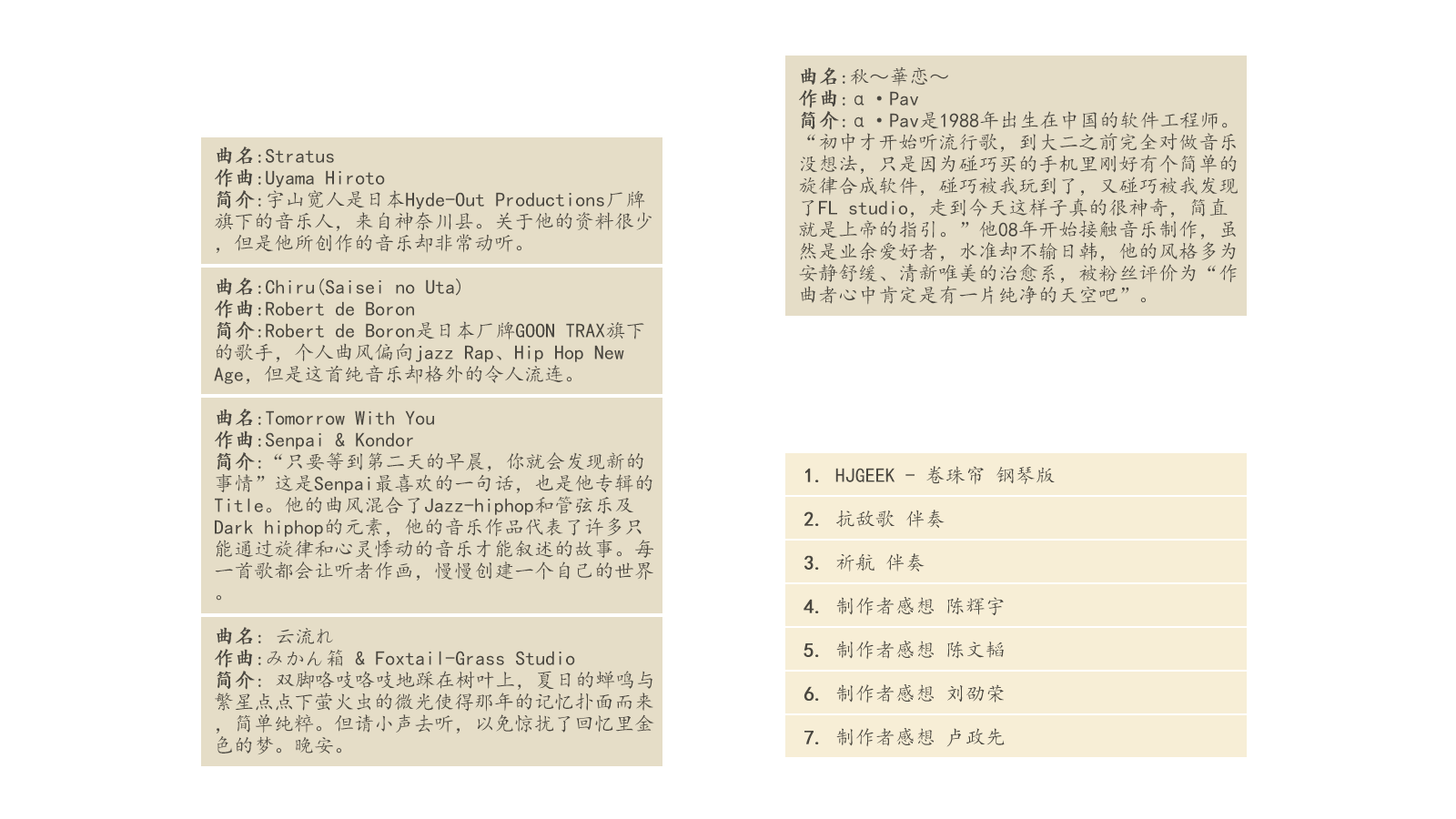
<style>
.page{position:relative;width:1456px;height:819px;background:#ffffff}
.page>*{position:absolute;margin:0}
.t1{font:20px/21.8px "KaiTi";color:#4a4740}
.t2{font:20px/21.8px "KaiTi";color:#4a4740;font-weight:bold}
</style>
<div class="page">
<p class="t1" style="left:799px;top:66px;width:439px;height:239px"><span class="t2">曲名</span>:秋～華恋～<br><span class="t2">作曲</span>:α·Pav<br><span class="t2">简介</span>:α·Pav是1988年出生在中国的软件工程师。“初中才开始听流行歌，到大二之前完全对做音乐没想法，只是因为碰巧买的手机里刚好有个简单的旋律合成软件，碰巧被我玩到了，又碰巧被我发现了FL studio，走到今天这样子真的很神奇，简直就是上帝的指引。”他08年开始接触音乐制作，虽然是业余爱好者，水准却不输日韩，他的风格多为安静舒缓、清新唯美的治愈系，被粉丝评价为“作曲者心中肯定是有一片纯净的天空吧”。</p>
<p class="t1" style="left:214px;top:147px;width:440px;height:608px"><span class="t2">曲名</span>:Stratus<br><span class="t2">作曲</span>:Uyama Hiroto<br><span class="t2">简介</span>:宇山宽人是日本Hyde-Out Productions厂牌旗下的音乐人，来自神奈川县。关于他的资料很少，但是他所创作的音乐却非常动听。<br><br><span class="t2">曲名</span>:Chiru(Saisei no Uta)<br><span class="t2">作曲</span>:Robert de Boron<br><span class="t2">简介</span>:Robert de Boron是日本厂牌GOON TRAX旗下的歌手，个人曲风偏向jazz Rap、Hip Hop New Age，但是这首纯音乐却格外的令人流连。<br><br><span class="t2">曲名</span>:Tomorrow With You<br><span class="t2">作曲</span>:Senpai &amp; Kondor<br><span class="t2">简介</span>:“只要等到第二天的早晨，你就会发现新的事情”这是Senpai最喜欢的一句话，也是他专辑的Title。他的曲风混合了Jazz-hiphop和管弦乐及Dark hiphop的元素，他的音乐作品代表了许多只能通过旋律和心灵悸动的音乐才能叙述的故事。每一首歌都会让听者作画，慢慢创建一个自己的世界。<br><br><span class="t2">曲名</span>: 云流れ<br><span class="t2">作曲</span>:みかん箱 &amp; Foxtail-Grass Studio<br><span class="t2">简介</span>: 双脚咯吱咯吱地踩在树叶上，夏日的蝉鸣与繁星点点下萤火虫的微光使得那年的记忆扑面而来，简单纯粹。但请小声去听，以免惊扰了回忆里金色的梦。晚安。</p>
<p class="t1" style="left:804px;top:466px;width:251px;height:281px"><span class="t2">1. </span>HJGEEK - 卷珠帘 钢琴版<br><br><span class="t2">2. </span>抗敌歌 伴奏<br><br><span class="t2">3. </span>祈航 伴奏<br><br><span class="t2">4. </span>制作者感想 陈辉宇<br><br><span class="t2">5. </span>制作者感想 陈文韬<br><br><span class="t2">6. </span>制作者感想 刘劭荣<br><br><span class="t2">7. </span>制作者感想 卢政先</p>
</div>
